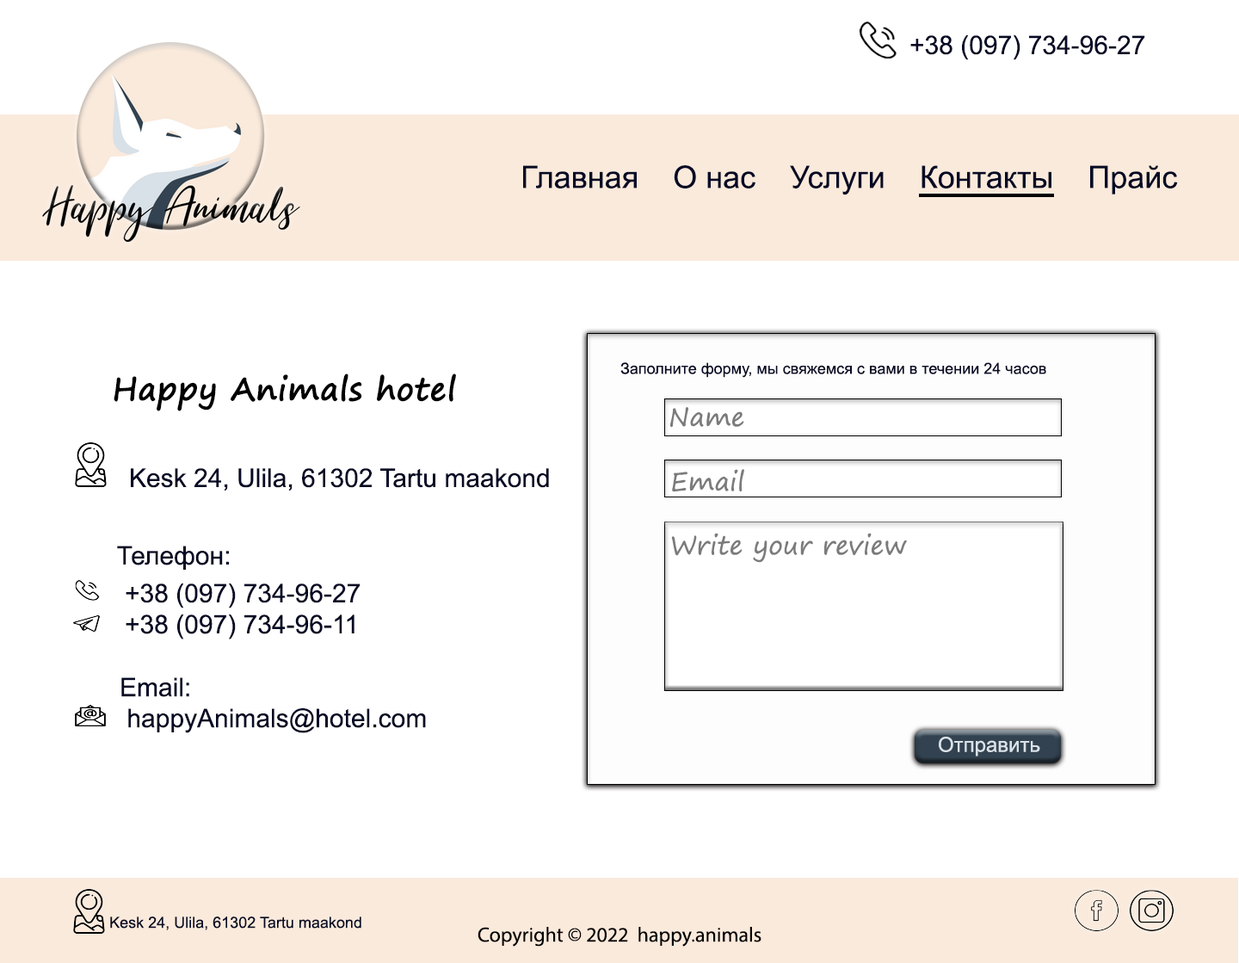
<style>
.page{position:relative;width:1239px;height:963px;background:#ffffff}
.page>*{position:absolute;margin:0}
.t1{font:25.8px "ArialMT";color:#060a25}
.t2{font:31px "ArialMT";color:#060a25}
.t3{font:15.5px "ArialMT";color:#060a25}
.t4{font:31px "SegoePrint";color:#000000;font-weight:bold}
.t5{font:25.8px "SegoePrint";color:#7b7b7c}
.t6{font:20.6px "ArialMT";color:#d9e1e8}
.t7{font:20.6px "MyriadPro-Regular";color:#040000}
</style>
<div class="page">
<p class="t1" style="left:910px;top:35px;width:235px;height:25px">+38 (097) 734-96-27</p>
<p class="t2" style="left:523px;top:165px;width:655px;height:30px">Главная    О нас    Услуги    Контакты    Прайс</p>
<p class="t3" style="left:620px;top:362px;width:426px;height:16px">Заполните форму, мы свяжемся с вами в течении 24 часов</p>
<p class="t4" style="left:114px;top:373px;width:342px;height:38px">Happy Animals hotel</p>
<p class="t5" style="left:670px;top:407px;width:74px;height:21px">Name</p>
<p class="t1" style="left:131px;top:468px;width:418px;height:23px">Kesk 24, Ulila, 61302 Tartu maakond</p>
<p class="t5" style="left:672px;top:469px;width:72px;height:23px">Email</p>
<p class="t5" style="left:671px;top:532px;width:236px;height:31px">Write your review</p>
<p class="t1" style="left:117px;top:545px;width:112px;height:24px">Телефон:</p>
<p class="t1" style="left:126px;top:583px;width:234px;height:25px">+38 (097) 734-96-27</p>
<p class="t1" style="left:126px;top:614px;width:228px;height:25px">+38 (097) 734-96-11</p>
<p class="t1" style="left:121px;top:677px;width:305px;height:56px">Email:<br> happyAnimals@hotel.com</p>
<p class="t6" style="left:939px;top:736px;width:101px;height:20px">Отправить</p>
<p class="t3" style="left:110px;top:916px;width:251px;height:14px">Kesk 24, Ulila, 61302 Tartu maakond</p>
<p class="t7" style="left:477px;top:926px;width:284px;height:20px">Copyright © 2022  happy.animals</p>
</div>
